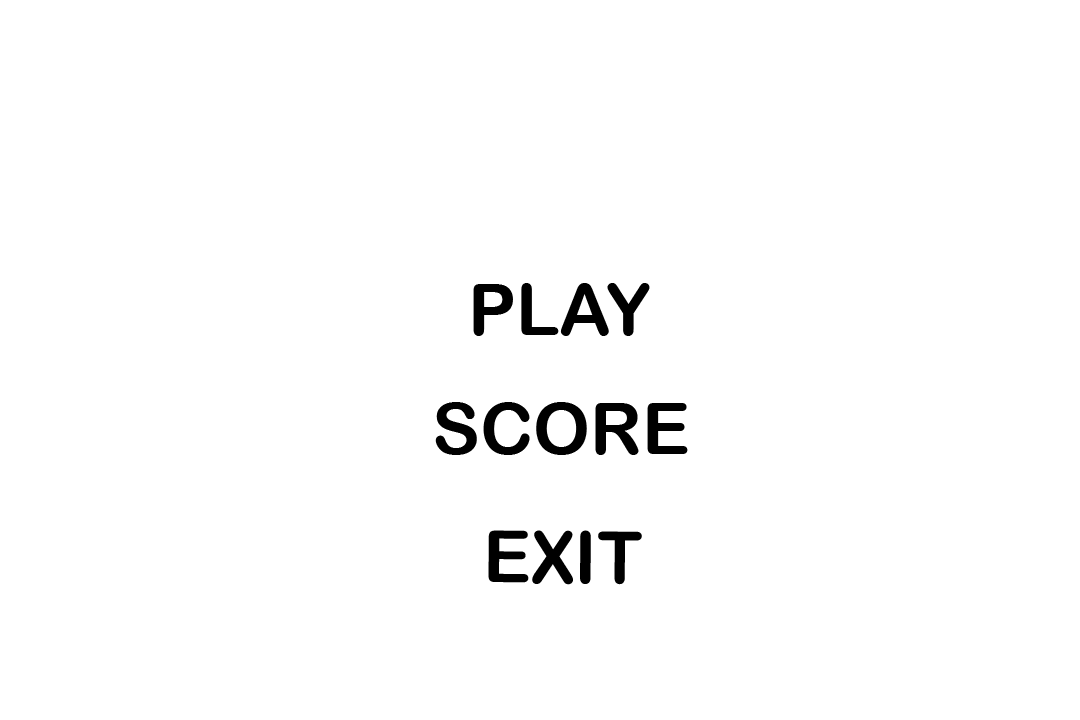
<style>
.page{position:relative;width:1080px;height:720px;background:#ffffff}
.page>*{position:absolute;margin:0}
.t1{font:72px "ArialRoundedMTBold";color:#000000}
</style>
<div class="page">
<p class="t1" style="left:473px;top:283px;width:177px;height:53px">PLAY</p>
<p class="t1" style="left:435px;top:402px;width:253px;height:53px">SCORE</p>
<p class="t1" style="left:488px;top:530px;width:154px;height:55px">EXIT</p>
</div>
